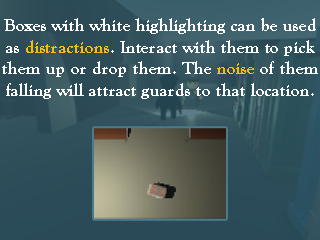
<style>
.page{position:relative;width:320px;height:240px}
.page>*{position:absolute;margin:0}
.t1{font:18px "GoudyOldStyleT-Bold";color:#ffffff}
.t2{font:18px "GoudyOldStyleT-Bold";color:#fbbb0e}
</style>
<div class="page">
<p class="t1" style="left:2px;top:18px;width:316px;height:81px;text-align:center">Boxes with white highlighting can be used<br>as <span class="t2">distractions</span>. Interact with them to pick<br>them up or drop them. The <span class="t2">noise</span> of them<br>falling will attract guards to that location.</p>
</div>
